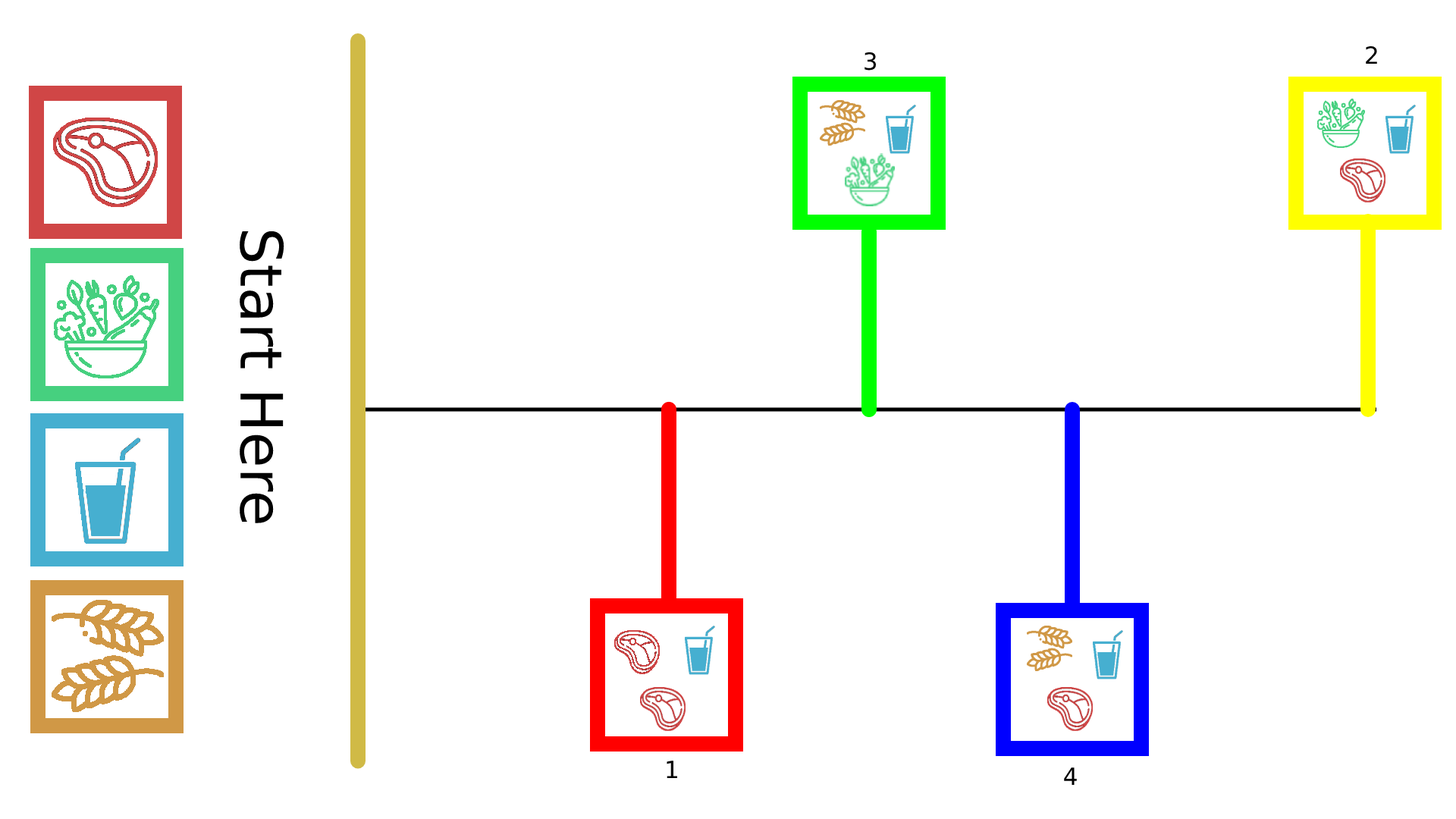
<style>
.page{position:relative;width:1456px;height:819px;background:#ffffff}
.page>*{position:absolute;margin:0}
.t1{font:23.6px "DejaVuSans";color:#000000}
.t2{font:58.2px "DejaVuSans";color:#000000}
</style>
<div class="page">
<p class="t1" style="left:864px;top:52px;width:13px;height:19px">3</p>
<p class="t1" style="left:1366px;top:45px;width:11px;height:19px">2</p>
<p class="t2" style="left:240px;top:231px;width:44px;height:292px;rotate:90deg">Start Here</p>
<p class="t1" style="left:667px;top:761px;width:10px;height:17px">1</p>
<p class="t1" style="left:1064px;top:767px;width:13px;height:18px">4</p>
</div>
